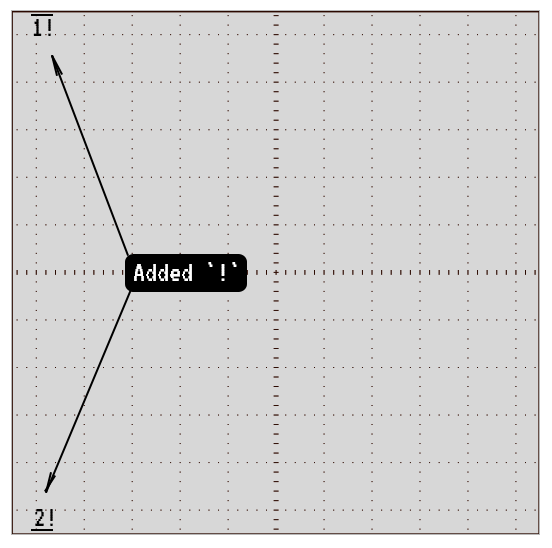
<style>
.page{position:relative;width:552px;height:548px;background:#d7d7d7}
.page>*{position:absolute;margin:0}
.t1{font:30px "VT323-Regular";color:#000000}
.t2{font:30px "VT323-Regular";color:#ffffff}
</style>
<div class="page">
<p class="t1" style="left:33px;top:19px;width:18px;height:17px">1!</p>
<p class="t2" style="left:134px;top:262px;width:103px;height:19px">Added `!`</p>
<p class="t1" style="left:35px;top:509px;width:18px;height:17px">2!</p>
</div>
